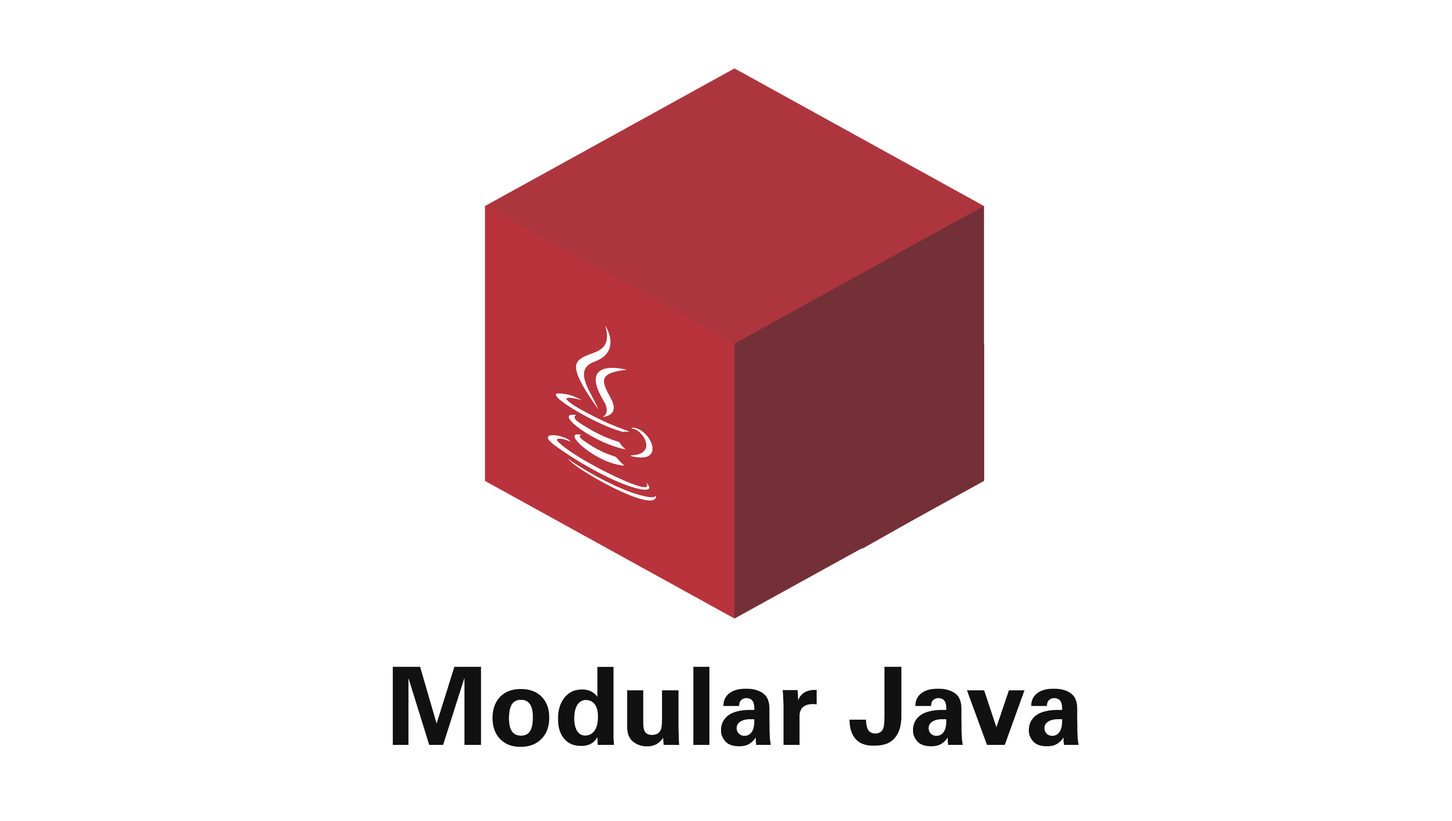
<style>
.page{position:relative;width:1452px;height:821px;background:#ffffff}
.page>*{position:absolute;margin:0}
.t1{font:108.1px "Univers-Bold";color:#111111}
</style>
<div class="page">
<p class="t1" style="left:392px;top:667px;width:687px;height:80px">Modular Java</p>
</div>
